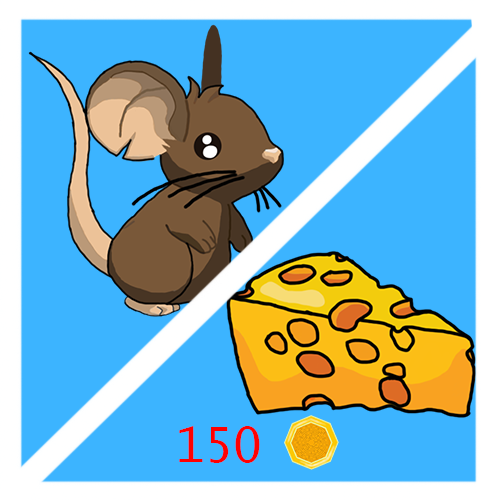
<style>
.page{position:relative;width:500px;height:500px;background:#3cb4ff}
.page>*{position:absolute;margin:0}
.t1{font:48px "LucidaConsole";color:#ff0101}
</style>
<div class="page">
<p class="t1" style="left:179px;top:426px;width:81px;height:37px">150</p>
</div>
